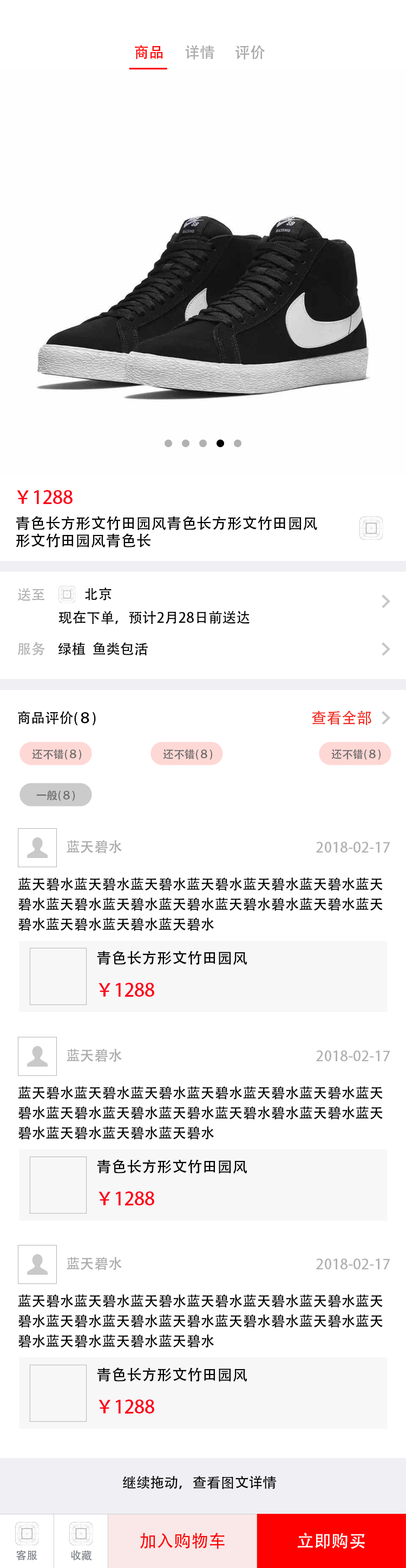
<style>
.page{position:relative;width:406px;height:1568px;background:#ffffff}
.page>*{position:absolute;margin:0}
.t1{font:15.2px "AdobeHeitiStd-Regular";color:#ff0000}
.t2{font:15.2px "AdobeHeitiStd-Regular";color:#a9a9a9}
.t3{font:18.4px "AdobeHeitiStd-Regular";color:#fd0018}
.t4{font:15.2px "AdobeHeitiStd-Regular";color:#000000}
.t5{font:14.1px "AdobeHeitiStd-Regular";color:#b2b2b2}
.t6{font:14.1px "AdobeHeitiStd-Regular";color:#000000}
.t7{font:15.2px "AdobeHeitiStd-Regular";color:#f12c20}
.t8{font:10.8px "AdobeHeitiStd-Regular";color:#6b6a6a}
.t9{font:14.1px "AdobeHeitiStd-Regular";color:#a9a9a9}
.t10{font:14.1px/20.1px "AdobeHeitiStd-Regular";color:#000000}
.t11{font:17.3px "AdobeHeitiStd-Regular";color:#ff0000}
.t12{font:17.3px "AdobeHeitiStd-Regular";color:#ffffff}
.t13{font:10.8px "AdobeHeitiStd-Regular";color:#7f8389}
</style>
<div class="page">
<p class="t1" style="left:135px;top:45px;width:28px;height:14px">商品</p>
<p class="t2" style="left:185px;top:45px;width:30px;height:15px">详情</p>
<p class="t2" style="left:236px;top:45px;width:29px;height:15px">评价</p>
<p class="t3" style="left:17px;top:490px;width:56px;height:14px">￥1288</p>
<p class="t4" style="left:16px;top:516px;width:302px;height:15px">青色长方形文竹田园风青色长方形文竹田园风</p>
<p class="t4" style="left:16px;top:533px;width:135px;height:15px">形文竹田园风青色长</p>
<p class="t5" style="left:17px;top:588px;width:27px;height:13px">送至</p>
<p class="t6" style="left:85px;top:588px;width:27px;height:13px">北京</p>
<p class="t6" style="left:59px;top:610px;width:191px;height:14px">现在下单，预计2月28日前送达</p>
<p class="t5" style="left:18px;top:642px;width:27px;height:14px">服务</p>
<p class="t6" style="left:58px;top:642px;width:90px;height:14px">绿植  鱼类包活</p>
<p class="t6" style="left:18px;top:711px;width:78px;height:14px">商品评价(８)</p>
<p class="t7" style="left:312px;top:711px;width:60px;height:14px">查看全部</p>
<p class="t8" style="left:32px;top:749px;width:49px;height:11px">还不错(８)</p>
<p class="t8" style="left:163px;top:749px;width:49px;height:11px">还不错(８)</p>
<p class="t8" style="left:332px;top:749px;width:49px;height:11px">还不错(８)</p>
<p class="t8" style="left:36px;top:790px;width:39px;height:11px">一般(８)</p>
<p class="t9" style="left:67px;top:840px;width:55px;height:14px">蓝天碧水</p>
<p class="t5" style="left:317px;top:842px;width:73px;height:11px">2018-02-17</p>
<p class="t10" style="left:18px;top:877px;width:365px;height:54px">蓝天碧水蓝天碧水蓝天碧水蓝天碧水蓝天碧水蓝天碧水蓝天碧水蓝天碧水蓝天碧水蓝天碧水蓝天碧水碧水蓝天碧水蓝天碧水蓝天碧水蓝天碧水蓝天碧水</p>
<p class="t4" style="left:97px;top:951px;width:151px;height:14px">青色长方形文竹田园风</p>
<p class="t3" style="left:99px;top:983px;width:55px;height:14px">￥1288</p>
<p class="t9" style="left:67px;top:1049px;width:55px;height:13px">蓝天碧水</p>
<p class="t5" style="left:317px;top:1050px;width:73px;height:11px">2018-02-17</p>
<p class="t10" style="left:18px;top:1086px;width:365px;height:54px">蓝天碧水蓝天碧水蓝天碧水蓝天碧水蓝天碧水蓝天碧水蓝天碧水蓝天碧水蓝天碧水蓝天碧水蓝天碧水碧水蓝天碧水蓝天碧水蓝天碧水蓝天碧水蓝天碧水</p>
<p class="t4" style="left:97px;top:1159px;width:151px;height:15px">青色长方形文竹田园风</p>
<p class="t3" style="left:99px;top:1191px;width:55px;height:14px">￥1288</p>
<p class="t9" style="left:67px;top:1257px;width:55px;height:13px">蓝天碧水</p>
<p class="t5" style="left:317px;top:1259px;width:73px;height:10px">2018-02-17</p>
<p class="t10" style="left:18px;top:1294px;width:365px;height:54px">蓝天碧水蓝天碧水蓝天碧水蓝天碧水蓝天碧水蓝天碧水蓝天碧水蓝天碧水蓝天碧水蓝天碧水蓝天碧水碧水蓝天碧水蓝天碧水蓝天碧水蓝天碧水蓝天碧水</p>
<p class="t4" style="left:97px;top:1367px;width:151px;height:15px">青色长方形文竹田园风</p>
<p class="t3" style="left:99px;top:1399px;width:55px;height:15px">￥1288</p>
<p class="t6" style="left:122px;top:1475px;width:155px;height:14px">继续拖动，查看图文详情</p>
<p class="t11" style="left:140px;top:1532px;width:85px;height:17px">加入购物车</p>
<p class="t12" style="left:298px;top:1533px;width:67px;height:16px">立即购买</p>
<p class="t13" style="left:16px;top:1550px;width:21px;height:10px">客服</p>
<p class="t13" style="left:71px;top:1550px;width:21px;height:10px">收藏</p>
</div>
